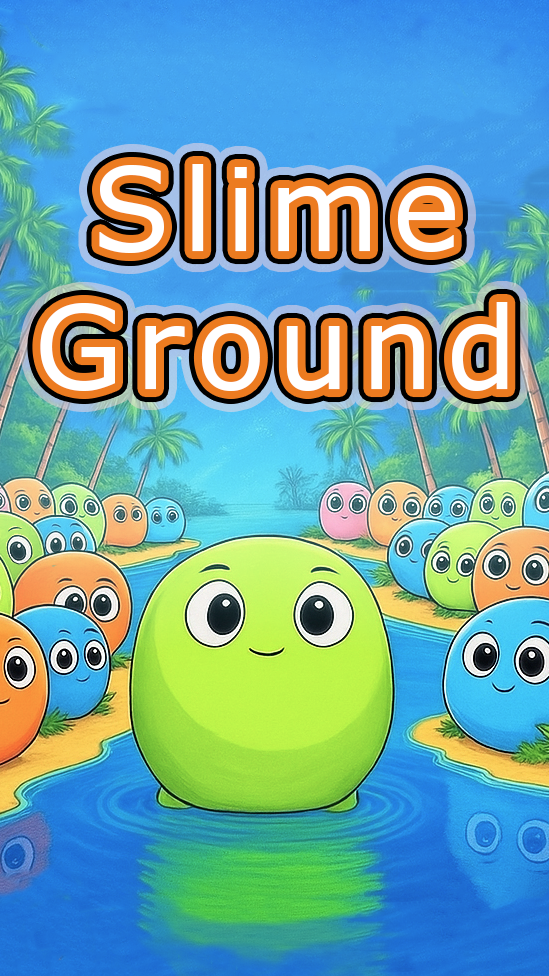
<style>
.page{position:relative;width:549px;height:976px}
.page>*{position:absolute;margin:0}
.t1{font:115.1px "Verdana";letter-spacing:0.1em;color:#ffffff}
</style>
<div class="page">
<p class="t1" style="left:40px;top:164px;width:468px;height:227px;text-align:center">Slime<br>Ground</p>
</div>
